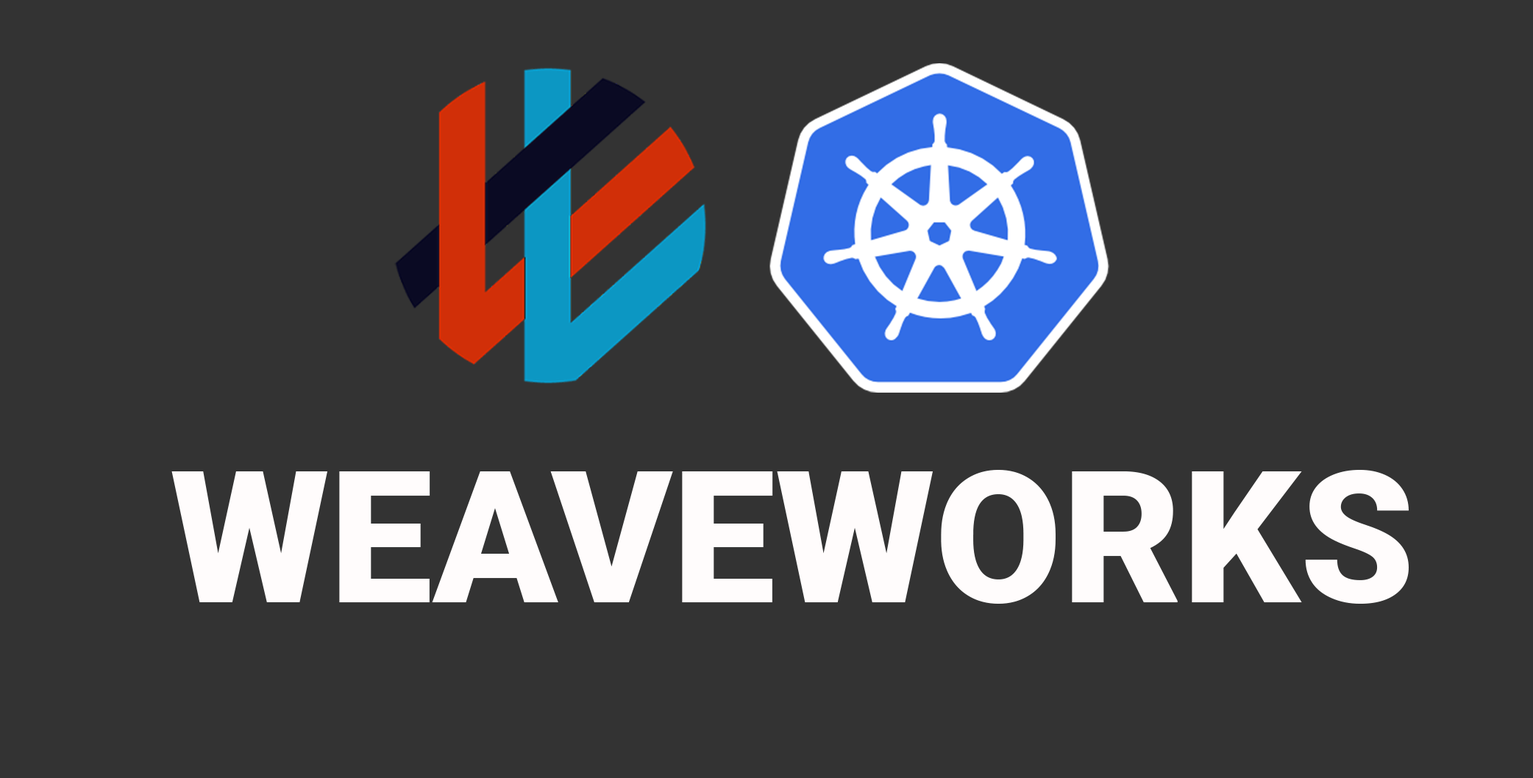
<style>
.page{position:relative;width:1533px;height:778px;background:#333333}
.page>*{position:absolute;margin:0}
.t1{font:183.9px "Roboto-Black";color:#fffcfc}
</style>
<div class="page">
<p class="t1" style="left:171px;top:470px;width:1237px;height:134px">WEAVEWORKS</p>
</div>
